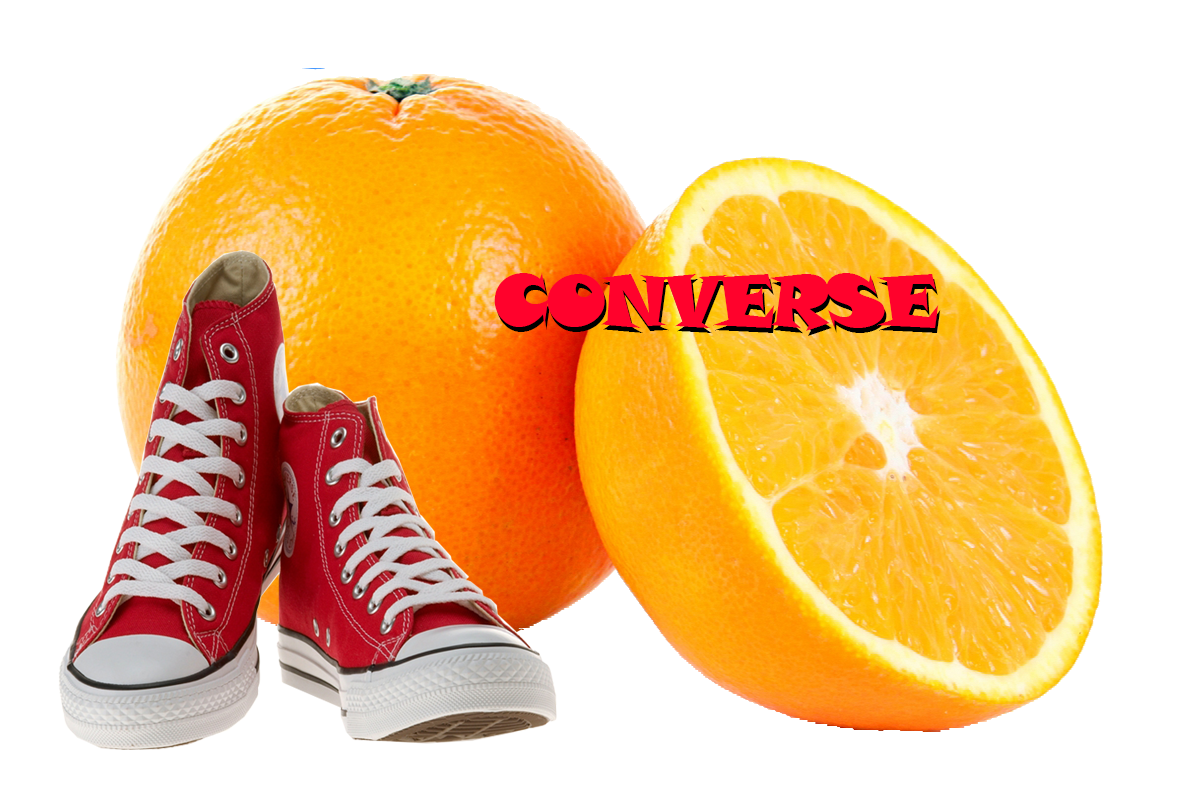
<style>
.page{position:relative;width:1200px;height:800px;background:#ffffff}
.page>*{position:absolute;margin:0}
.t1{font:72px "SnapITC-Regular";letter-spacing:-0.06em;color:#ff022c}
</style>
<div class="page">
<p class="t1" style="left:494px;top:273px;width:445px;height:58px">CONVERSE</p>
<p class="t1" style="left:496px;top:278px;width:445px;height:58px">CONVERSE</p>
</div>
